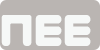
<style>
.page{position:relative;width:100px;height:50px;background:#bab5b2}
.page>*{position:absolute;margin:0}
.t1{font:44.4px "Zorque-Regular";color:#f6f8f7}
</style>
<div class="page">
<p class="t1" style="left:1px;top:15px;width:90px;height:31px">Nee</p>
</div>
